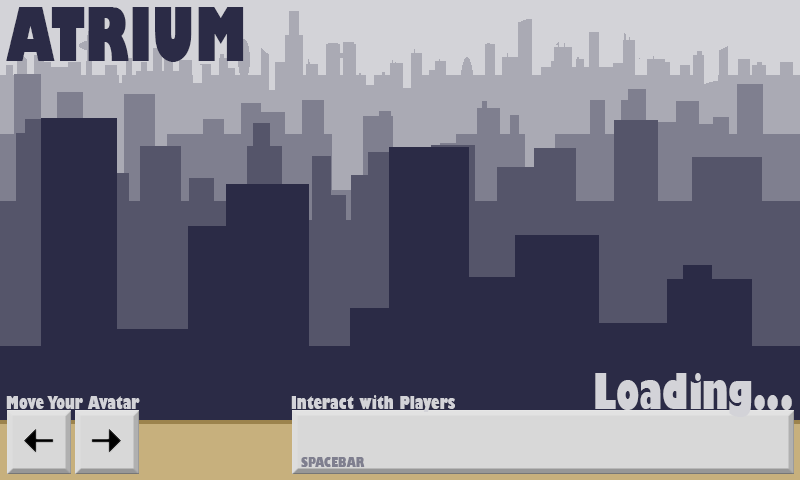
<style>
.page{position:relative;width:800px;height:480px;background:#2b2b46}
.page>*{position:absolute;margin:0}
.t1{font:72px "GillSans-UltraBoldCondensed";color:#2b2b46}
.t2{font:48px "GillSans-UltraBoldCondensed";color:#d3d3d8}
.t3{font:18px "GillSans-UltraBoldCondensed";color:#d3d3d8}
.t4{font:14px "GillSans-UltraBoldCondensed";color:#7f7f8f}
</style>
<div class="page">
<p class="t1" style="left:6px;top:7px;width:238px;height:55px">ATRIUM</p>
<p class="t2" style="left:595px;top:373px;width:197px;height:44px">Loading...</p>
<p class="t3" style="left:6px;top:396px;width:134px;height:13px">Move Your Avatar</p>
<p class="t3" style="left:291px;top:395px;width:164px;height:17px">Interact with Players</p>
<p class="t4" style="left:301px;top:457px;width:64px;height:10px">SPACEBAR</p>
</div>
